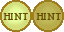
<style>
.page{position:relative;width:64px;height:32px;background:#ffffff}
.page>*{position:absolute;margin:0}
.t1{font:10px "PoorRichard-Regular";color:#644b00}
</style>
<div class="page">
<p class="t1" style="left:3px;top:13px;width:25px;height:7px">HI N T</p>
<p class="t1" style="left:36px;top:13px;width:25px;height:7px">HI N T</p>
</div>
